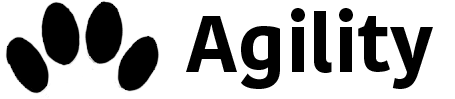
<style>
.page{position:relative;width:455px;height:99px;background:#ffffff}
.page>*{position:absolute;margin:0}
.t1{font:80px "KohinoorBangla-Bold";color:#000000}
</style>
<div class="page">
<p class="t1" style="left:186px;top:8px;width:247px;height:81px">Agility</p>
</div>
